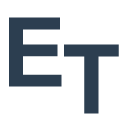
<style>
.page{position:relative;width:128px;height:128px;background:#ffffff}
.page>*{position:absolute;margin:0}
.t1{font:96px "Arial-BoldMT";color:#2c3e50}
</style>
<div class="page">
<p class="t1" style="left:9px;top:17px;width:53px;height:70px">E</p>
<p class="t1" style="left:64px;top:44px;width:55px;height:70px">T</p>
</div>
